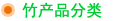
<style>
.page{position:relative;width:119px;height:21px;background:#ffffff}
.page>*{position:absolute;margin:0}
.t1{font:16px "SimHei";color:#00cc33}
</style>
<div class="page">
<p class="t1" style="left:22px;top:2px;width:80px;height:16px">竹产品分类</p>
</div>
